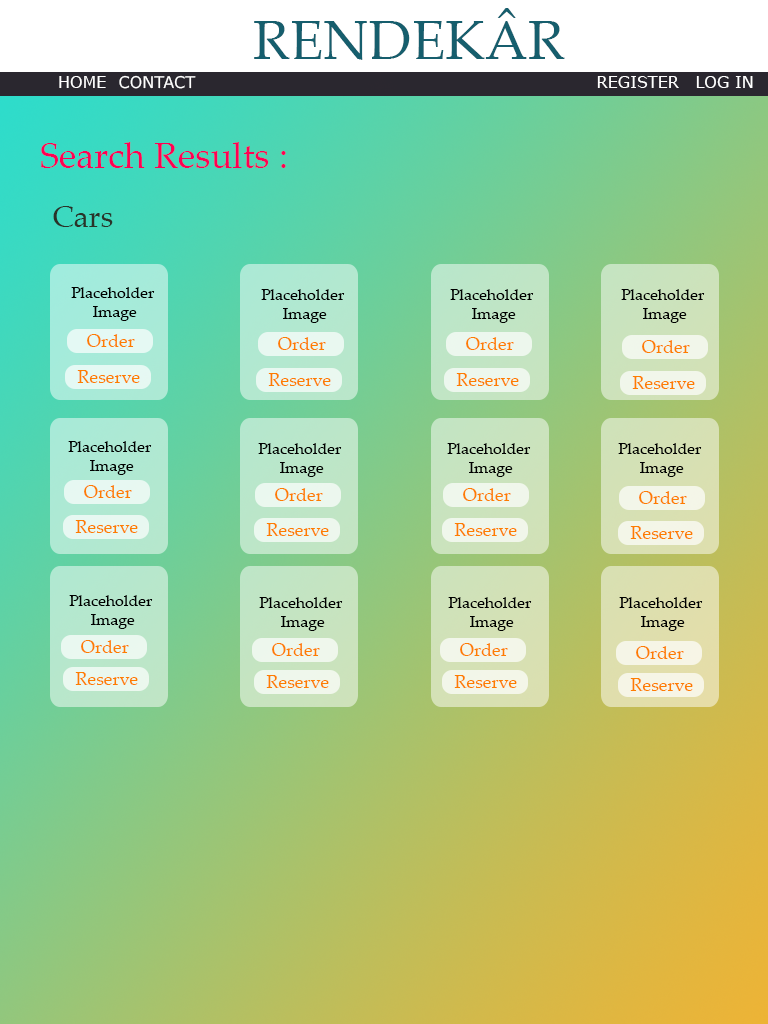
<style>
.page{position:relative;width:768px;height:1024px}
.page>*{position:absolute;margin:0}
.t1{font:55px "PalatinoLinotype-Roman";color:#165e6d}
.t2{font:16px "Verdana";color:#ffffff}
.t3{font:36px "PalatinoLinotype-Roman";color:#ff0054}
.t4{font:30px "PalatinoLinotype-Roman";color:#2a3329}
.t5{font:16px "PalatinoLinotype-Roman";color:#000000}
.t6{font:18px "PalatinoLinotype-Roman";color:#fe7d00}
</style>
<div class="page">
<p class="t1" style="left:254px;top:8px;width:311px;height:52px">RENDEKÂR</p>
<p class="t2" style="left:59px;top:76px;width:47px;height:12px">HOME</p>
<p class="t2" style="left:119px;top:75px;width:77px;height:14px">CONTACT</p>
<p class="t2" style="left:597px;top:76px;width:82px;height:12px">REGISTER</p>
<p class="t2" style="left:696px;top:76px;width:57px;height:12px">LOG IN</p>
<p class="t3" style="left:41px;top:142px;width:245px;height:26px">Search Results :</p>
<p class="t4" style="left:53px;top:206px;width:60px;height:21px">Cars</p>
<p class="t5" style="left:71px;top:287px;width:84px;height:34px;text-align:center">Placeholder <br>Image</p>
<p class="t5" style="left:261px;top:289px;width:84px;height:34px;text-align:center">Placeholder <br>Image</p>
<p class="t5" style="left:450px;top:289px;width:84px;height:34px;text-align:center">Placeholder <br>Image</p>
<p class="t5" style="left:621px;top:289px;width:84px;height:34px;text-align:center">Placeholder <br>Image</p>
<p class="t6" style="left:87px;top:334px;width:48px;height:13px">Order</p>
<p class="t6" style="left:278px;top:337px;width:48px;height:13px">Order</p>
<p class="t6" style="left:466px;top:337px;width:48px;height:13px">Order</p>
<p class="t6" style="left:642px;top:340px;width:48px;height:13px">Order</p>
<p class="t6" style="left:77px;top:370px;width:63px;height:13px">Reserve</p>
<p class="t6" style="left:268px;top:373px;width:63px;height:13px">Reserve</p>
<p class="t6" style="left:456px;top:373px;width:63px;height:13px">Reserve</p>
<p class="t6" style="left:632px;top:376px;width:63px;height:13px">Reserve</p>
<p class="t5" style="left:68px;top:441px;width:84px;height:34px;text-align:center">Placeholder <br>Image</p>
<p class="t5" style="left:258px;top:443px;width:84px;height:34px;text-align:center">Placeholder <br>Image</p>
<p class="t5" style="left:447px;top:443px;width:84px;height:34px;text-align:center">Placeholder <br>Image</p>
<p class="t5" style="left:618px;top:443px;width:84px;height:34px;text-align:center">Placeholder <br>Image</p>
<p class="t6" style="left:84px;top:485px;width:48px;height:13px">Order</p>
<p class="t6" style="left:275px;top:488px;width:48px;height:13px">Order</p>
<p class="t6" style="left:463px;top:488px;width:48px;height:13px">Order</p>
<p class="t6" style="left:639px;top:491px;width:48px;height:13px">Order</p>
<p class="t6" style="left:75px;top:520px;width:63px;height:13px">Reserve</p>
<p class="t6" style="left:266px;top:523px;width:63px;height:13px">Reserve</p>
<p class="t6" style="left:454px;top:523px;width:63px;height:13px">Reserve</p>
<p class="t6" style="left:630px;top:526px;width:63px;height:13px">Reserve</p>
<p class="t5" style="left:69px;top:595px;width:84px;height:34px;text-align:center">Placeholder <br>Image</p>
<p class="t5" style="left:259px;top:597px;width:84px;height:34px;text-align:center">Placeholder <br>Image</p>
<p class="t5" style="left:448px;top:597px;width:84px;height:34px;text-align:center">Placeholder <br>Image</p>
<p class="t5" style="left:619px;top:597px;width:84px;height:34px;text-align:center">Placeholder <br>Image</p>
<p class="t6" style="left:81px;top:640px;width:48px;height:13px">Order</p>
<p class="t6" style="left:272px;top:643px;width:48px;height:13px">Order</p>
<p class="t6" style="left:460px;top:643px;width:48px;height:13px">Order</p>
<p class="t6" style="left:636px;top:646px;width:48px;height:13px">Order</p>
<p class="t6" style="left:75px;top:672px;width:63px;height:13px">Reserve</p>
<p class="t6" style="left:266px;top:675px;width:63px;height:13px">Reserve</p>
<p class="t6" style="left:454px;top:675px;width:63px;height:13px">Reserve</p>
<p class="t6" style="left:630px;top:678px;width:63px;height:13px">Reserve</p>
</div>
